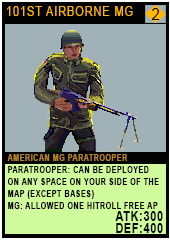
<style>
.page{position:relative;width:170px;height:241px;background:#a0b2b8}
.page>*{position:absolute;margin:0}
.t1{font:12.8px "ArialMT";letter-spacing:0.08em;color:#ffb800;text-transform:uppercase;scale:0.86 1}
.t2{font:17.4px "ArialMT";letter-spacing:0.08em;color:#030200;text-transform:uppercase;scale:0.86 1}
.t3{font:9.3px/12px "Arial-BoldMT";letter-spacing:0.08em;color:#020100;text-transform:uppercase;scale:0.76 1}
.t4{font:9.3px/20.2px "Arial-BoldMT";letter-spacing:0.08em;color:#b4832c;text-transform:uppercase;scale:0.76 1}
.t5{font:13.9px/12px "Arial-BoldMT";letter-spacing:0.08em;color:#050606;text-transform:uppercase;scale:0.76 1}
</style>
<div class="page">
<p class="t1" style="left:7px;top:6px;width:126px;height:10px">101st Airborne MG</p>
<p class="t2" style="left:151px;top:8px;width:9px;height:12px">2</p>
<p class="t3" style="left:7px;top:154px;width:156px;height:79px"><span class="t4">American Mg paratrooper<br></span>paratrooper: can be deployed on any space on your side of the map (except bases)<br>mg: allowed one hitroll free ap<br><span class="t5">atk:300<br>def:400</span></p>
</div>
